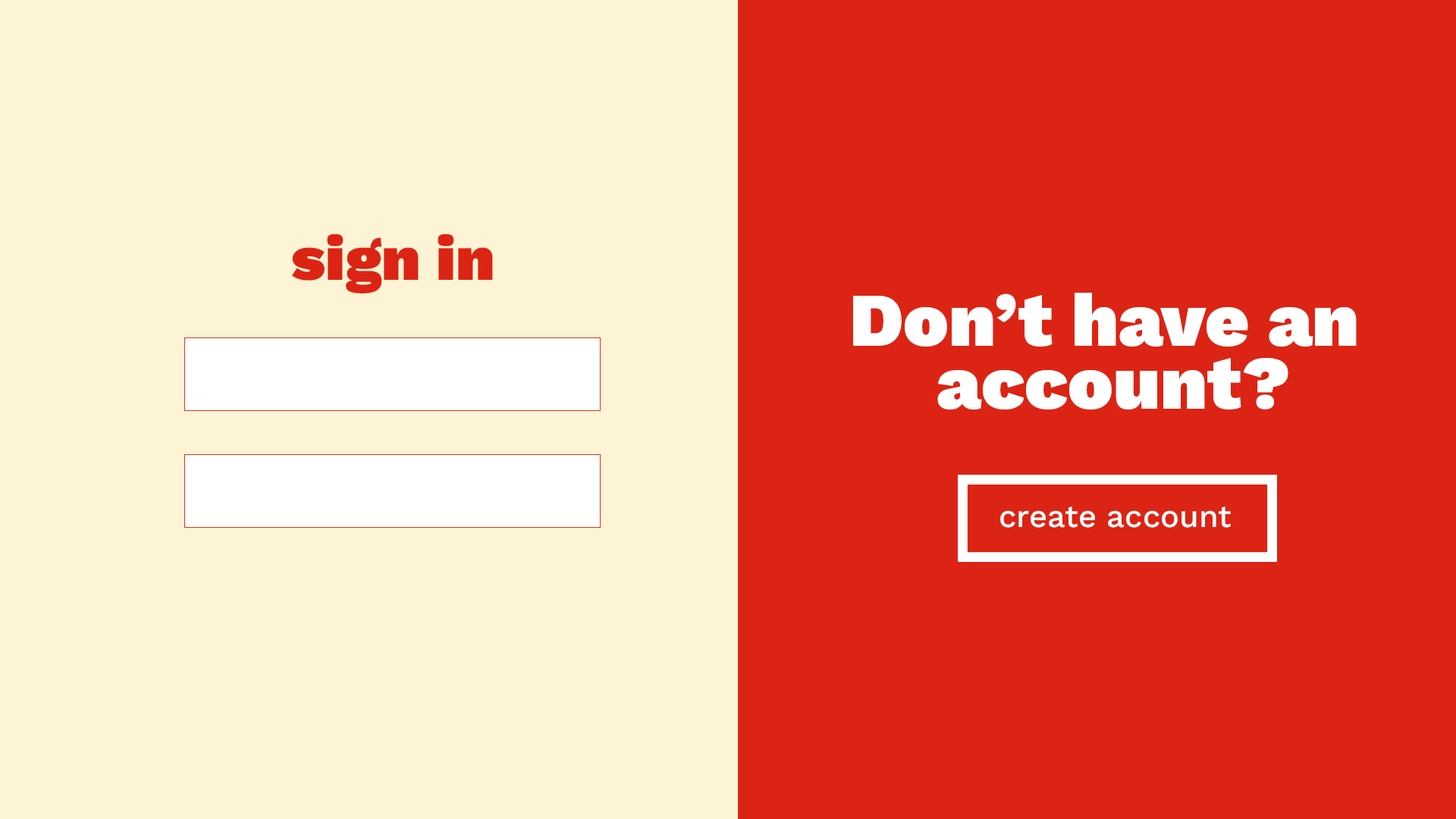
<style>
.page{position:relative;width:1456px;height:819px;background:#dc2414}
.page>*{position:absolute;margin:0}
.t1{font:63.2px "WorkSans-Black";color:#dc2414}
.t2{font:75.8px/63.2px "WorkSans-Black";color:#ffffff}
.t3{font:31.6px "WorkSans-Medium";color:#ffffff}
</style>
<div class="page">
<p class="t1" style="left:292px;top:234px;width:201px;height:59px">sign in</p>
<p class="t2" style="left:853px;top:293px;width:504px;height:116px;text-align:center">Don’t have an <br>account?</p>
<p class="t3" style="left:1000px;top:507px;width:231px;height:21px">create account</p>
</div>
